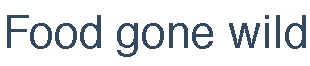
<style>
.page{position:relative;width:310px;height:66px;background:#ffffff}
.page>*{position:absolute;margin:0}
.t1{font:44.5px "Helvetica";color:#34495e}
</style>
<div class="page">
<p class="t1" style="left:7px;top:15px;width:299px;height:42px">Food gone wild</p>
</div>
